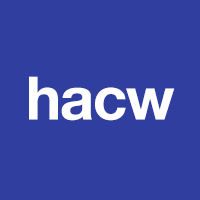
<style>
.page{position:relative;width:200px;height:200px;background:#303f9f}
.page>*{position:absolute;margin:0}
.t1{font:60px "HelveticaNeue-Bold";letter-spacing:-0.025em;color:#ffffff}
</style>
<div class="page">
<p class="t1" style="left:29px;top:76px;width:146px;height:45px">hacw</p>
</div>
